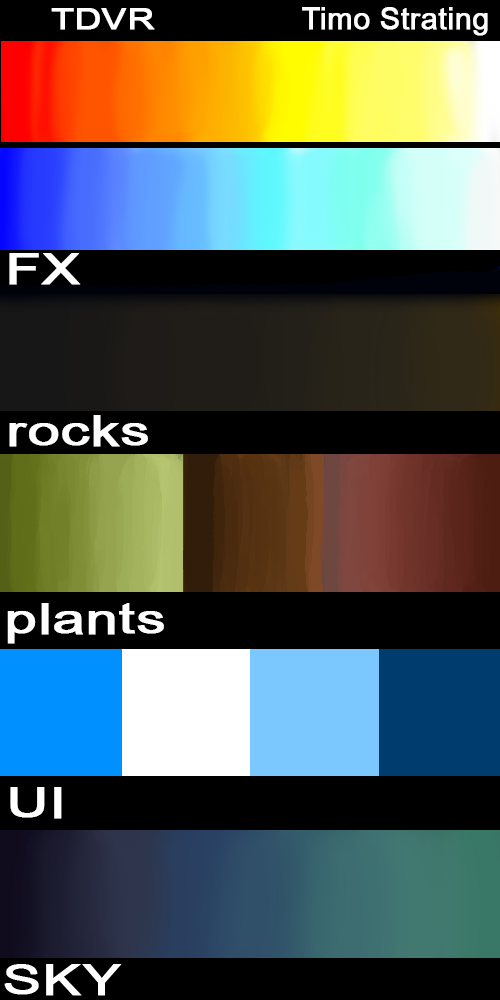
<style>
.page{position:relative;width:500px;height:1000px;background:#000000}
.page>*{position:absolute;margin:0}
.t1{font:29.1px "DokChampa";color:#fefefe;font-weight:bold;scale:1.26 1}
.t2{font:30px "DokChampa";color:#fefefe;font-weight:bold}
.t3{font:43.2px "DokChampa";color:#fefefe;font-weight:bold;scale:1.32 1}
</style>
<div class="page">
<p class="t1" style="left:51px;top:8px;width:104px;height:22px">TDVR</p>
<p class="t2" style="left:302px;top:7px;width:186px;height:29px">Timo Strating</p>
<p class="t3" style="left:9px;top:253px;width:72px;height:32px">FX</p>
<p class="t3" style="left:9px;top:415px;width:139px;height:32px">rocks</p>
<p class="t3" style="left:7px;top:603px;width:157px;height:41px">plants</p>
<p class="t3" style="left:10px;top:787px;width:52px;height:32px">UI</p>
</div>
